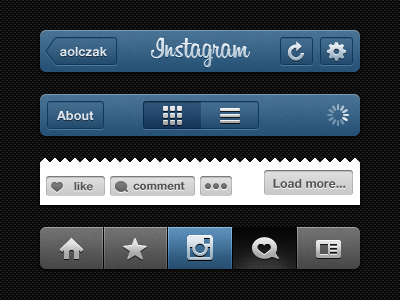
<style>
.page{position:relative;width:400px;height:300px;background:#060606}
.page>*{position:absolute;margin:0}
.t1{font:12.8px "HelveticaNeue-Bold";color:#e0e8ee}
.t2{font:12.8px "HelveticaNeue-Bold";color:#dbe4eb}
.t3{font:11.4px "HelveticaNeue-Bold";color:#535353}
.t4{font:12.2px "HelveticaNeue-Bold";color:#535353}
</style>
<div class="page">
<p class="t1" style="left:60px;top:47px;width:47px;height:10px">aolczak</p>
<p class="t2" style="left:57px;top:111px;width:37px;height:10px">About</p>
<p class="t3" style="left:74px;top:182px;width:19px;height:9px">like</p>
<p class="t3" style="left:133px;top:182px;width:52px;height:8px">comment</p>
<p class="t4" style="left:273px;top:179px;width:73px;height:9px">Load more...</p>
</div>
